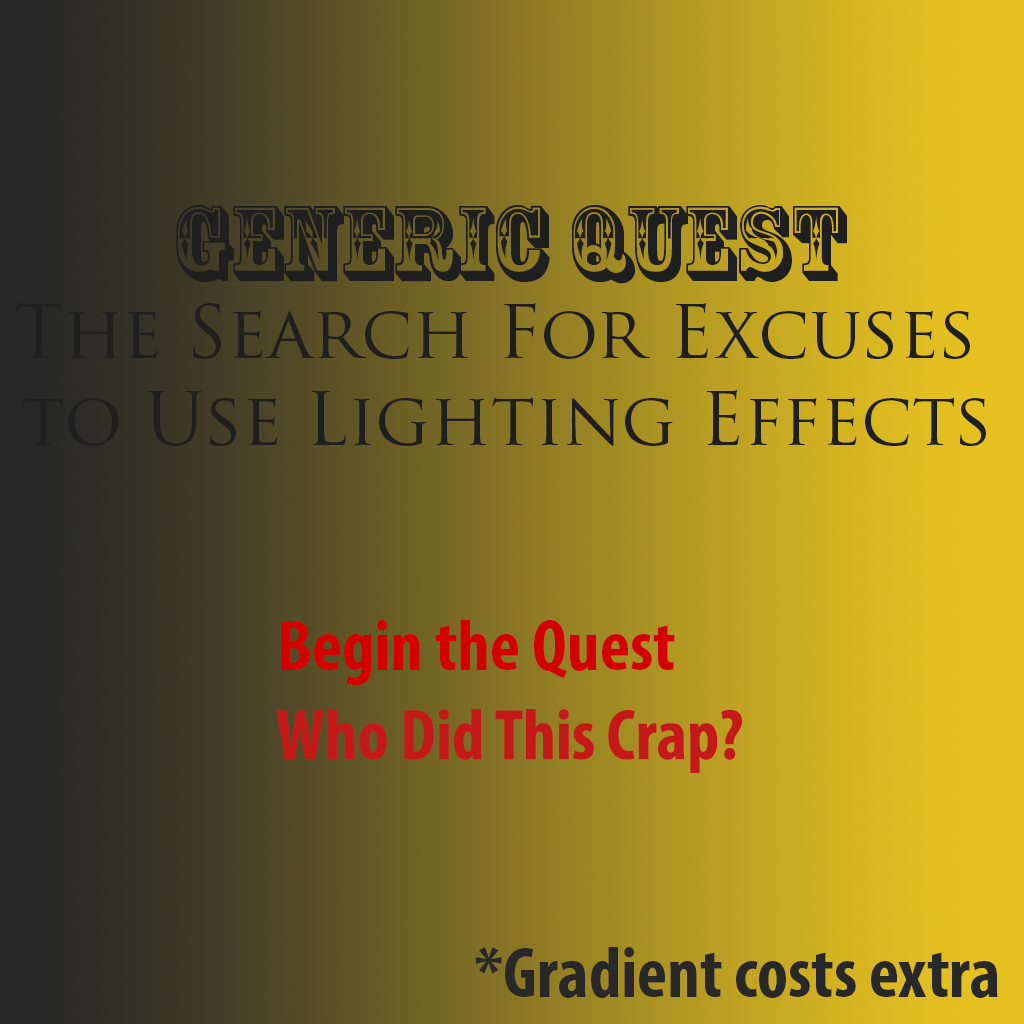
<style>
.page{position:relative;width:1024px;height:1024px}
.page>*{position:absolute;margin:0}
.t1{font:72.3px "TrajanPro-Regular";color:#1f1f1f}
.t2{font:100px "RosewoodStd-Regular";color:#1f1f1f}
.t3{font:72px "MyriadPro-BoldCond";color:#d20000}
.t4{font:72px "MyriadPro-BoldCond";color:#c41919}
.t5{font:72px "MyriadPro-BoldCond";color:#282828}
</style>
<div class="page">
<p class="t1" style="left:15px;top:204px;width:971px;height:242px;text-align:center"><span class="t2">Generic Quest<br></span>The Search For Excuses <br>to Use Lighting Effects</p>
<p class="t3" style="left:281px;top:620px;width:394px;height:65px">Begin the Quest</p>
<p class="t4" style="left:276px;top:709px;width:467px;height:64px">Who Did This Crap?</p>
<p class="t5" style="left:476px;top:947px;width:522px;height:51px">*Gradient costs extra</p>
</div>
